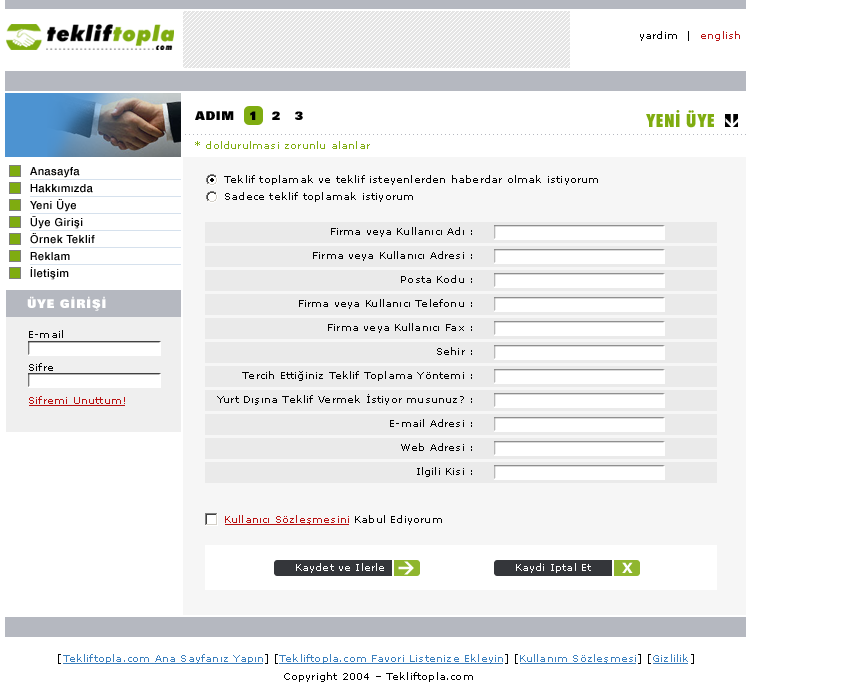
<style>
.page{position:relative;width:850px;height:700px;background:#ffffff}
.page>*{position:absolute;margin:0}
.t1{font:10px "Verdana";letter-spacing:0.02em;color:#000000}
.t2{font:10px "Verdana";letter-spacing:0.02em;color:#b91717}
.t3{font:12px "ZurichBT-ExtraBlack";letter-spacing:0.04em;color:#000000}
.t4{font:18px "FuturaBT-ExtraBlackCondensed";letter-spacing:0.04em;color:#7fac10}
.t5{font:10px "Verdana";letter-spacing:0.02em;color:#7fac10}
.t6{font:11px/17px "Swiss721BT-Medium";letter-spacing:0.04em;color:#000000}
.t7{font:10px/17px "Verdana";letter-spacing:0.02em;color:#000000}
.t8{font:10px/17px "Verdana";letter-spacing:0.02em;color:#b81010}
.t9{font:10px/24px "Verdana";letter-spacing:0.02em;color:#000000}
.t10{font:12px "ZurichBT-ExtraBlack";letter-spacing:0.06em;color:#ffffff}
.t11{font:10px/11px "Verdana";letter-spacing:0.02em;color:#b81010}
.t12{font:10px/11px "Verdana";letter-spacing:0.02em;color:#000000}
.t13{font:10px "Verdana";letter-spacing:0.02em;color:#ffffff}
.t14{font:14px "Verdana-Bold";letter-spacing:0.02em;color:#ffffff}
.t15{font:10px/18px "Verdana";letter-spacing:0.02em;color:#3b7fbd}
.t16{font:10px/18px "Verdana";letter-spacing:0.02em;color:#000000}
</style>
<div class="page">
<p class="t1" style="left:640px;top:31px;width:100px;height:10px">yardim  |  <span class="t2">english</span></p>
<p class="t3" style="left:195px;top:111px;width:108px;height:9px">ADIM   1   2   3</p>
<p class="t4" style="left:646px;top:110px;width:68px;height:18px">YENÝ ÜYE</p>
<p class="t5" style="left:195px;top:141px;width:175px;height:8px">* doldurulmasi zorunlu alanlar</p>
<p class="t6" style="left:30px;top:167px;width:65px;height:113px">Anasayfa<br>Hakkýmýzda<br>Yeni Üye<br>Üye Giriþi<br>Örnek Teklif<br>Reklam<br>Ýletiþim</p>
<p class="t7" style="left:224px;top:175px;width:374px;height:350px">Teklif toplamak ve teklif isteyenlerden haberdar olmak istiyorum <br>Sadece teklif toplamak istiyorum <br><br><br><br><br><br><br><br><br><br><br><br><br><br><br><br><br><br><br><span class="t8">Kullanıcı Sözleşmesini</span> Kabul Ediyorum</p>
<p class="t9" style="left:217px;top:227px;width:255px;height:250px;text-align:right">Firma veya Kullanıcı Adı :<br>Firma veya Kullanıcı Adresi :<br>Posta Kodu :<br>Firma veya Kullanıcı Telefonu :<br>Firma veya Kullanıcı Fax :<br>Sehir :<br>Tercih Ettiğiniz Teklif Toplama Yöntemi :<br>Yurt Dışına Teklif Vermek İstiyor musunuz? :<br>E-mail Adresi :<br>Web Adresi :<br>Ilgili Kisi :</p>
<p class="t10" style="left:27px;top:296px;width:79px;height:15px">ÜYE GÝRÝÞÝ</p>
<p class="t11" style="left:29px;top:330px;width:96px;height:74px"><span class="t12">E-mail<br><br><br>Sifre<br><br><br></span>Sifremi Unuttum!</p>
<p class="t13" style="left:296px;top:563px;width:88px;height:10px">Kaydet ve Ilerle</p>
<p class="t13" style="left:516px;top:563px;width:75px;height:10px">Kaydi Iptal Et</p>
<p class="t14" style="left:622px;top:562px;width:11px;height:11px">X</p>
<p class="t15" style="left:58px;top:654px;width:636px;height:28px;text-align:center"><span class="t16">[</span>Tekliftopla.com Ana Sayfanız Yapın<span class="t16">] [</span>Tekliftopla.com Favori Listenize Ekleyin<span class="t16">] [</span>Kullanım Sözleşmesi<span class="t16">] [</span>Gizlilik<span class="t16">] <br> Copyright 2004 – Tekliftopla.com</span></p>
</div>
